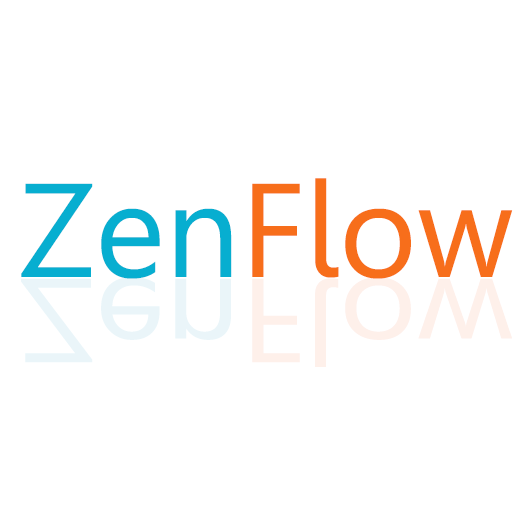
<style>
.page{position:relative;width:528px;height:528px;background:#ffffff}
.page>*{position:absolute;margin:0}
.t1{font:133.3px "Leelawadee";color:#f76e1b}
.t2{font:133.3px "Leelawadee";color:#07aed0}
.t3{font:118.6px "Leelawadee";color:#fef0ea;scale:1.12 1}
</style>
<div class="page">
<p class="t1" style="left:21px;top:178px;width:492px;height:101px"><span class="t2">Zen</span>Flow</p>
<p class="t3" style="left:21px;top:277px;width:491px;height:90px">ZenFlow</p>
</div>
